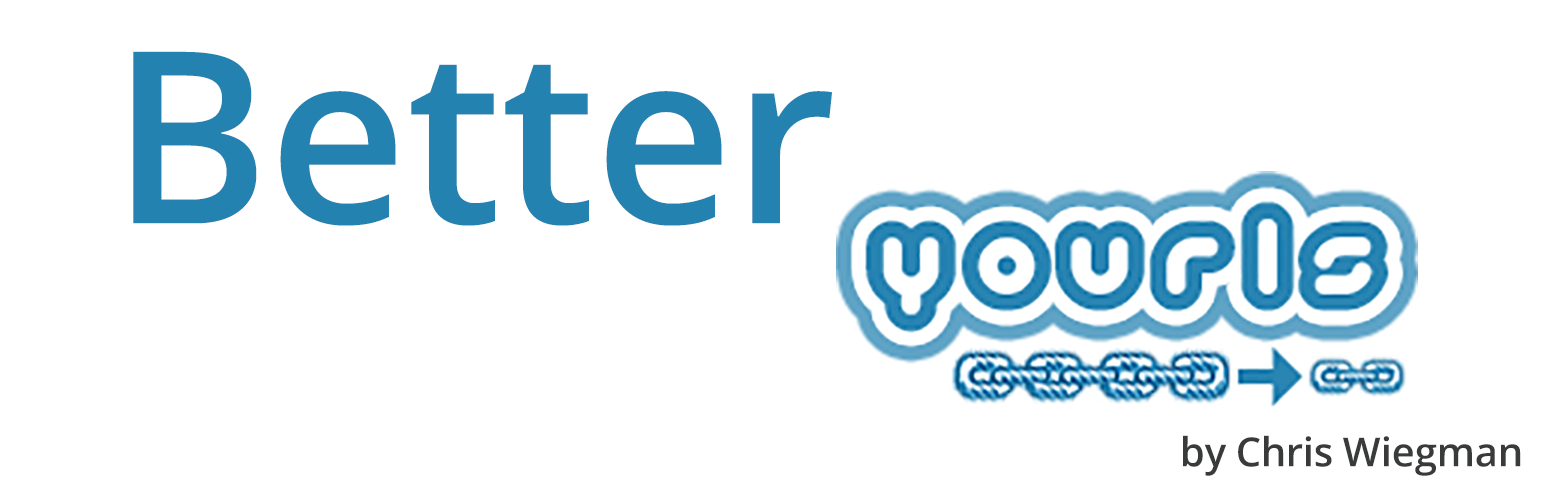
<style>
.page{position:relative;width:1554px;height:500px;background:#ffffff}
.page>*{position:absolute;margin:0}
.t1{font:240px "OpenSans-Semibold";color:#2482b1}
.t2{font:40px "OpenSans-Semibold";color:#393a3a}
</style>
<div class="page">
<p class="t1" style="left:133px;top:51px;width:699px;height:175px">Better</p>
<p class="t2" style="left:1183px;top:435px;width:338px;height:41px">by Chris Wiegman</p>
</div>
